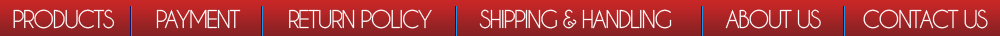
<style>
.page{position:relative;width:1000px;height:36px}
.page>*{position:absolute;margin:0}
.t1{font:23px "CaviarDreams";letter-spacing:-0.08em;color:#ffffff;text-transform:uppercase}
</style>
<div class="page">
<p class="t1" style="left:13px;top:9px;width:975px;height:20px">Products       payment        return policy        shipping &amp; handling         about us       contact us</p>
</div>
